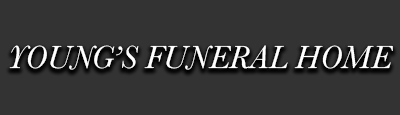
<style>
.page{position:relative;width:400px;height:115px;background:#333333}
.page>*{position:absolute;margin:0}
.t1{font:33.3px "Baskerville-Italic";color:#ffffff}
</style>
<div class="page">
<p class="t1" style="left:9px;top:45px;width:384px;height:25px">YOUNG’S FUNERAL HOME</p>
</div>
